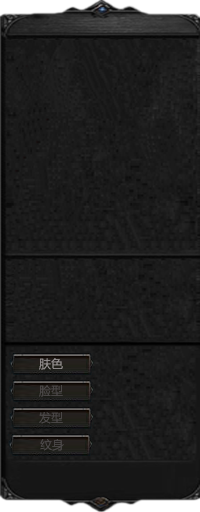
<style>
.page{position:relative;width:200px;height:512px}
.page>*{position:absolute;margin:0}
.t1{font:12px "MicrosoftYaHei";color:#8f8b8b}
.t2{font:12px "MicrosoftYaHei";color:#494646}
</style>
<div class="page">
<p class="t1" style="left:39px;top:358px;width:24px;height:12px">肤色</p>
<p class="t2" style="left:39px;top:385px;width:24px;height:12px">脸型</p>
<p class="t2" style="left:39px;top:412px;width:24px;height:12px">发型</p>
<p class="t2" style="left:40px;top:439px;width:24px;height:12px">纹身</p>
</div>
